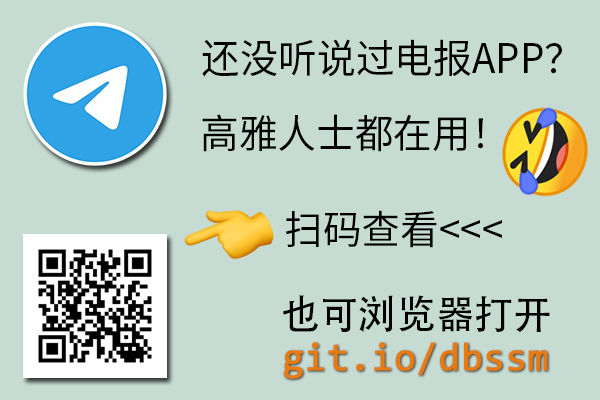
<style>
.page{position:relative;width:600px;height:400px;background:#c6dbd2}
.page>*{position:absolute;margin:0}
.t1{font:39.8px "SourceHanSansSC-Regular";color:#000000}
.t2{font:39.8px "AdobeHeitiStd-Regular";color:#000000}
.t3{font:39.8px "Consolas";color:#e77a10;font-weight:bold}
</style>
<div class="page">
<p class="t1" style="left:202px;top:39px;width:360px;height:38px">还没听说过电报APP？</p>
<p class="t1" style="left:202px;top:114px;width:281px;height:38px">高雅人士都在用！</p>
<p class="t1" style="left:285px;top:210px;width:217px;height:38px">扫码查看&lt;&lt;&lt;</p>
<p class="t2" style="left:283px;top:295px;width:267px;height:38px">也可浏览器打开</p>
<p class="t3" style="left:283px;top:342px;width:265px;height:37px">git.io/dbssm</p>
</div>
